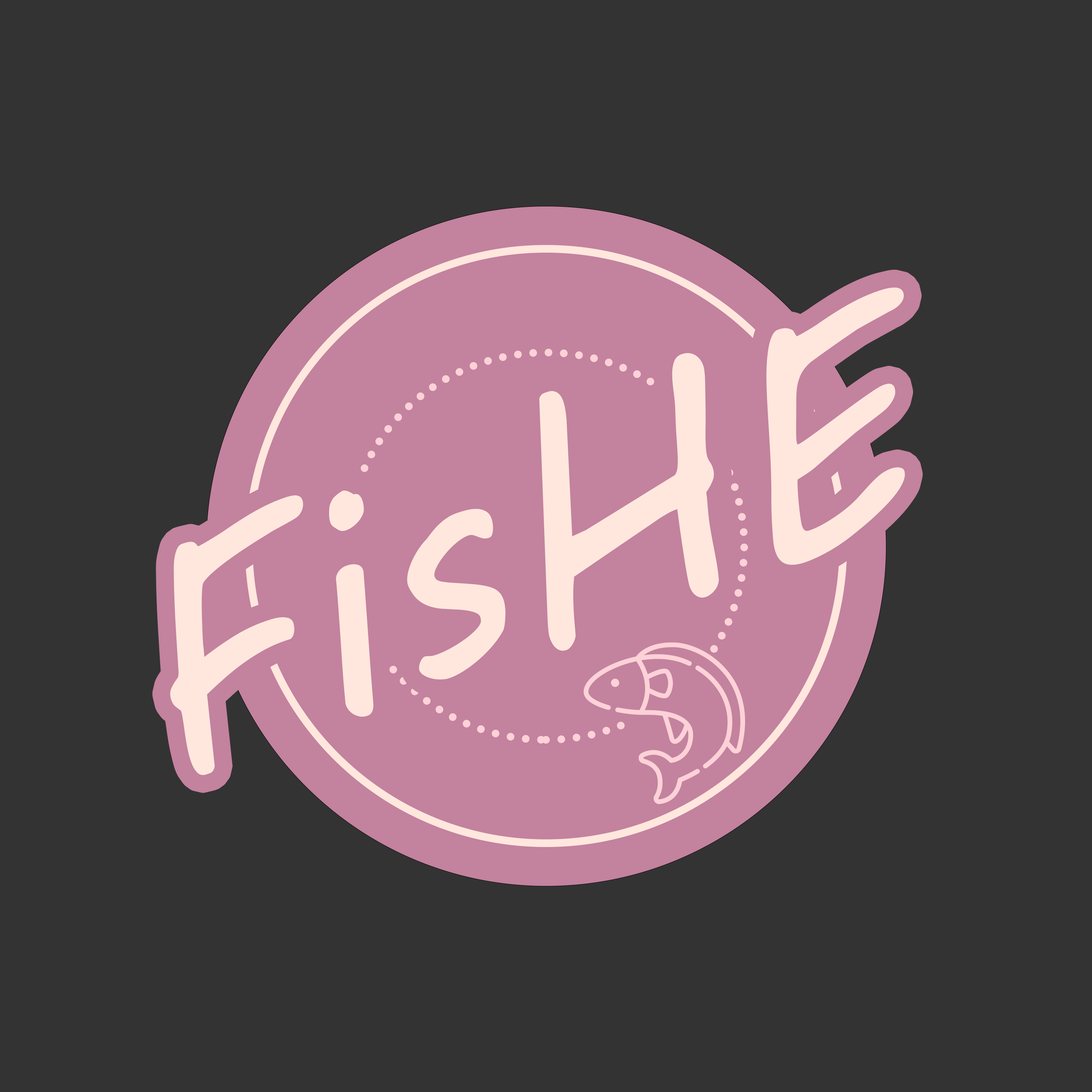
<style>
.page{position:relative;width:1092px;height:1092px;background:#333333}
.page>*{position:absolute;margin:0}
.t1{font:321.1px "MVBoli";color:#ffe7de}
</style>
<div class="page">
<p class="t1" style="left:170px;top:288px;width:735px;height:487px;rotate:-19deg">FisHE</p>
</div>
